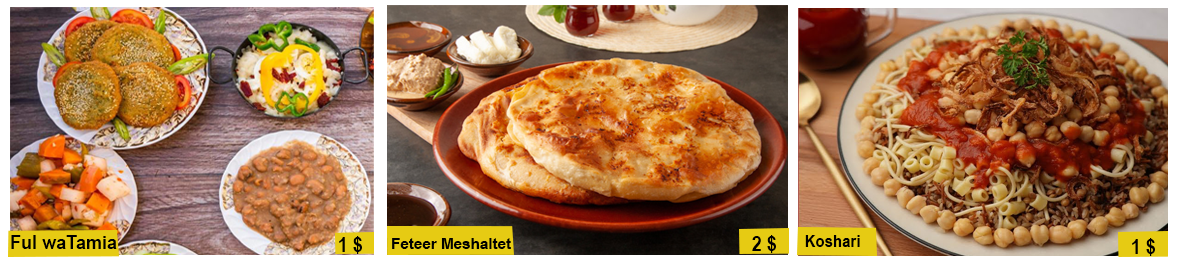
<style>
.page{position:relative;width:1180px;height:260px}
.page>*{position:absolute;margin:0}
.t1{font:18.7px "ArialNarrow-Bold";color:#000000;scale:1.17 1}
.t2{font:20.8px "ArialNarrow-Bold";color:#000000;scale:1.05 1}
.t3{font:15.8px "ArialNarrow-Bold";color:#000000;scale:1.17 1}
.t4{font:17.5px "ArialNarrow-Bold";color:#000000;scale:1.05 1}
</style>
<div class="page">
<p class="t1" style="left:11px;top:235px;width:106px;height:14px">Ful waTamia</p>
<p class="t2" style="left:339px;top:236px;width:23px;height:18px">1 $</p>
<p class="t3" style="left:392px;top:238px;width:119px;height:11px">Feteer Meshaltet</p>
<p class="t2" style="left:752px;top:235px;width:24px;height:18px">2 $</p>
<p class="t4" style="left:805px;top:235px;width:55px;height:12px">Koshari</p>
<p class="t2" style="left:1132px;top:238px;width:23px;height:18px">1 $</p>
</div>
